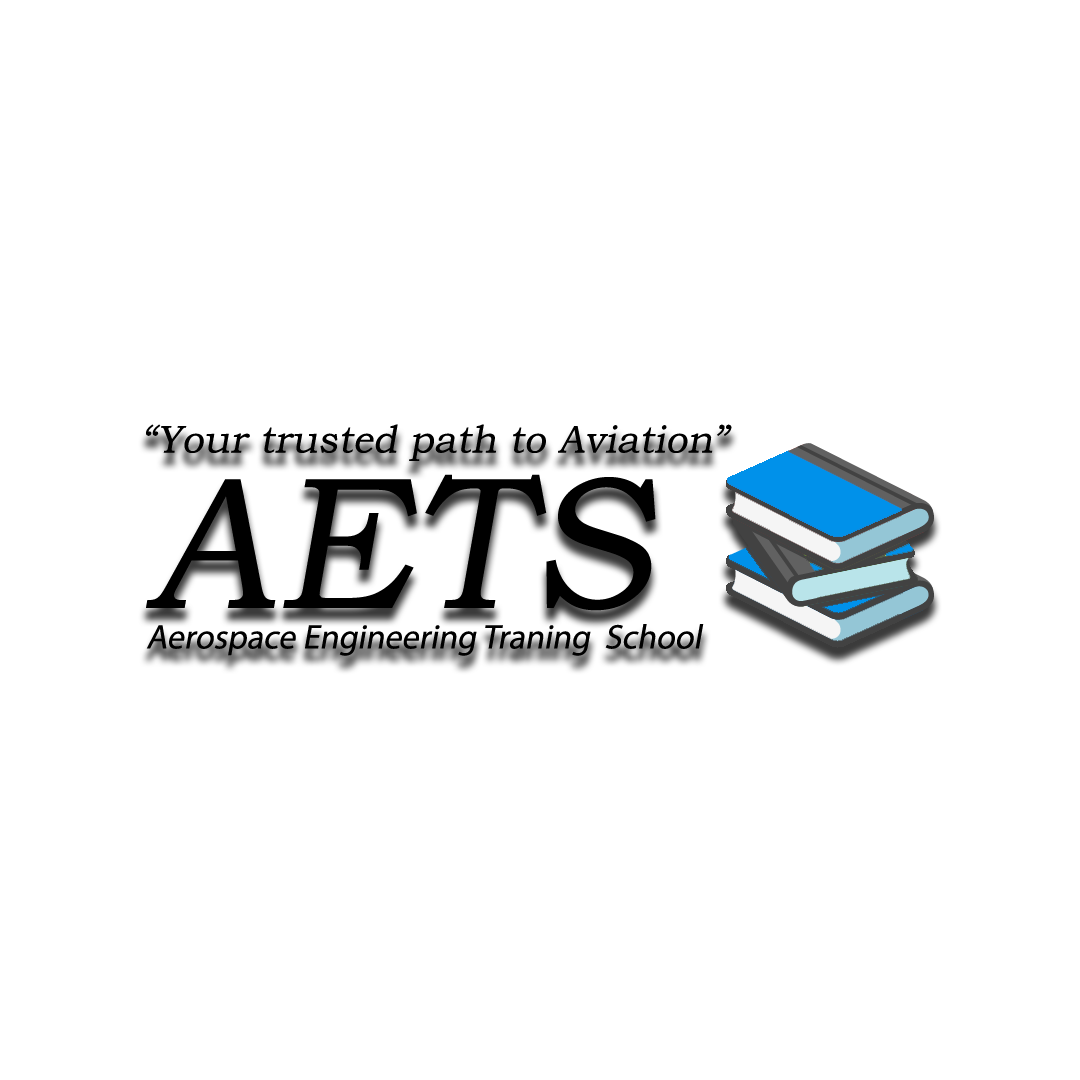
<style>
.page{position:relative;width:1080px;height:1080px;background:#ffffff}
.page>*{position:absolute;margin:0}
.t1{font:38.9px "BookmanOldStyle";color:#000000;font-style:italic}
.t2{font:34.2px "MyriadPro-Regular";color:#000000;font-style:italic}
</style>
<div class="page">
<p class="t1" style="left:146px;top:424px;width:586px;height:37px">“Your trusted path to Aviation”</p>
<p class="t2" style="left:146px;top:624px;width:558px;height:32px">Aerospace Engineering Traning  School</p>
</div>
